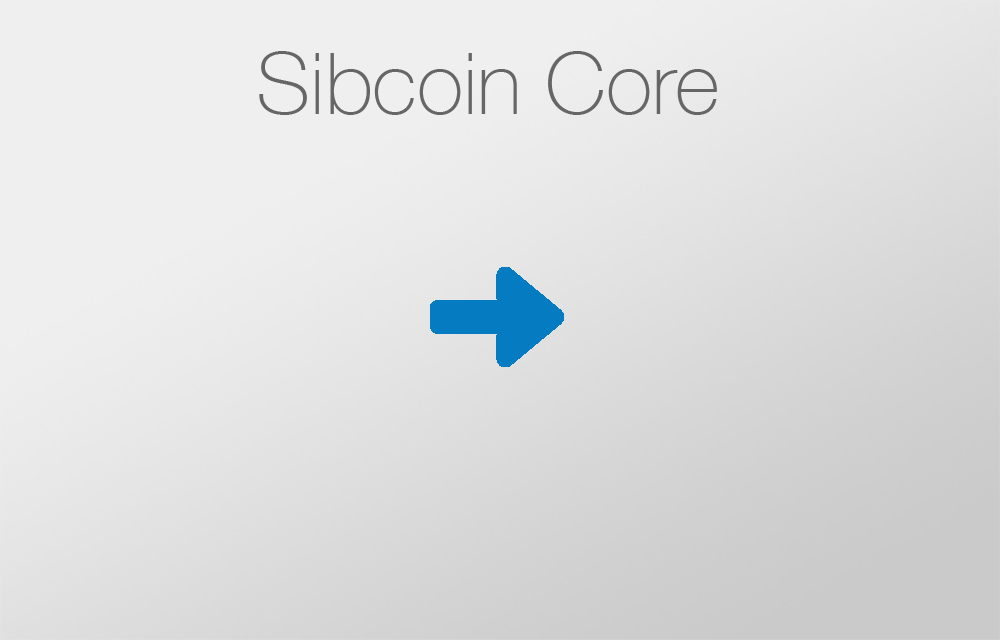
<style>
.page{position:relative;width:1000px;height:640px}
.page>*{position:absolute;margin:0}
.t1{font:85.7px "HelveticaNeue-Thin";color:#666666}
</style>
<div class="page">
<p class="t1" style="left:259px;top:51px;width:458px;height:64px">Sibcoin Core</p>
</div>
